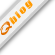
<style>
.page{position:relative;width:55px;height:55px;background:#ffffff}
.page>*{position:absolute;margin:0}
.t1{font:9.3px "Impact";letter-spacing:0.1em;color:#ff9900;font-style:italic;scale:1.45 1}
.t2{font:9.7px "MaturaMTScriptCapitals";color:#e27100;scale:1.45 1}
</style>
<div class="page">
<p class="t1" style="left:9px;top:0px;width:24px;height:25px;rotate:-46deg">blog</p>
<p class="t2" style="left:0px;top:21px;width:12px;height:14px;rotate:-46deg">Q</p>
</div>
